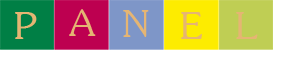
<style>
.page{position:relative;width:284px;height:57px}
.page>*{position:absolute;margin:0}
.t1{font:60.2px "JasmineUPC";color:#e5b573}
</style>
<div class="page">
<p class="t1" style="left:15px;top:12px;width:22px;height:27px">P</p>
<p class="t1" style="left:69px;top:9px;width:27px;height:27px">A</p>
<p class="t1" style="left:123px;top:10px;width:26px;height:27px">N</p>
<p class="t1" style="left:181px;top:12px;width:21px;height:27px">E</p>
<p class="t1" style="left:236px;top:12px;width:22px;height:27px">L</p>
</div>
